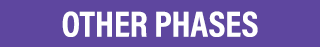
<style>
.page{position:relative;width:320px;height:47px;background:#5e469f}
.page>*{position:absolute;margin:0}
.t1{font:36.3px "AcuminProCond-Bold";color:#ffffff;text-transform:uppercase}
</style>
<div class="page">
<p class="t1" style="left:62px;top:11px;width:196px;height:26px">Other phases</p>
</div>
